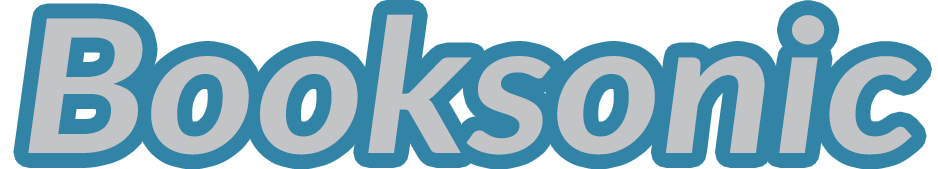
<style>
.page{position:relative;width:938px;height:169px;background:#3184a5}
.page>*{position:absolute;margin:0}
.t1{font:272.7px "Lato-BoldItalic";color:#c3c4c6;scale:1.12 1}
</style>
<div class="page">
<p class="t1" style="left:28px;top:14px;width:889px;height:141px">Booksonic</p>
</div>
